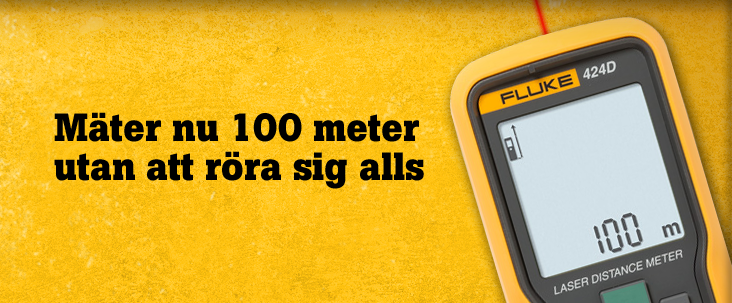
<style>
.page{position:relative;width:732px;height:303px}
.page>*{position:absolute;margin:0}
.t1{font:39px/39px "BotonPro-Bold";letter-spacing:-0.01em;color:#000000}
</style>
<div class="page">
<p class="t1" style="left:54px;top:112px;width:370px;height:77px">Mäter nu 100 meter utan att röra sig alls</p>
</div>
